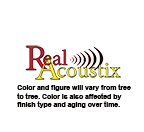
<style>
.page{position:relative;width:144px;height:132px;background:#ffffff}
.page>*{position:absolute;margin:0}
.t1{font:6.8px "Arial-BoldMT";color:#040300}
</style>
<div class="page">
<p class="t1" style="left:17px;top:84px;width:114px;height:24px">Color and figure will vary from tree<br>to tree. Color is also affected by<br>finish type and aging over time.</p>
</div>
